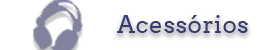
<style>
.page{position:relative;width:273px;height:50px;background:#ffffff}
.page>*{position:absolute;margin:0}
.t1{font:24px "Arvo";letter-spacing:0.02em;color:#37396f}
</style>
<div class="page">
<p class="t1" style="left:117px;top:15px;width:131px;height:18px">Acessórios</p>
</div>
